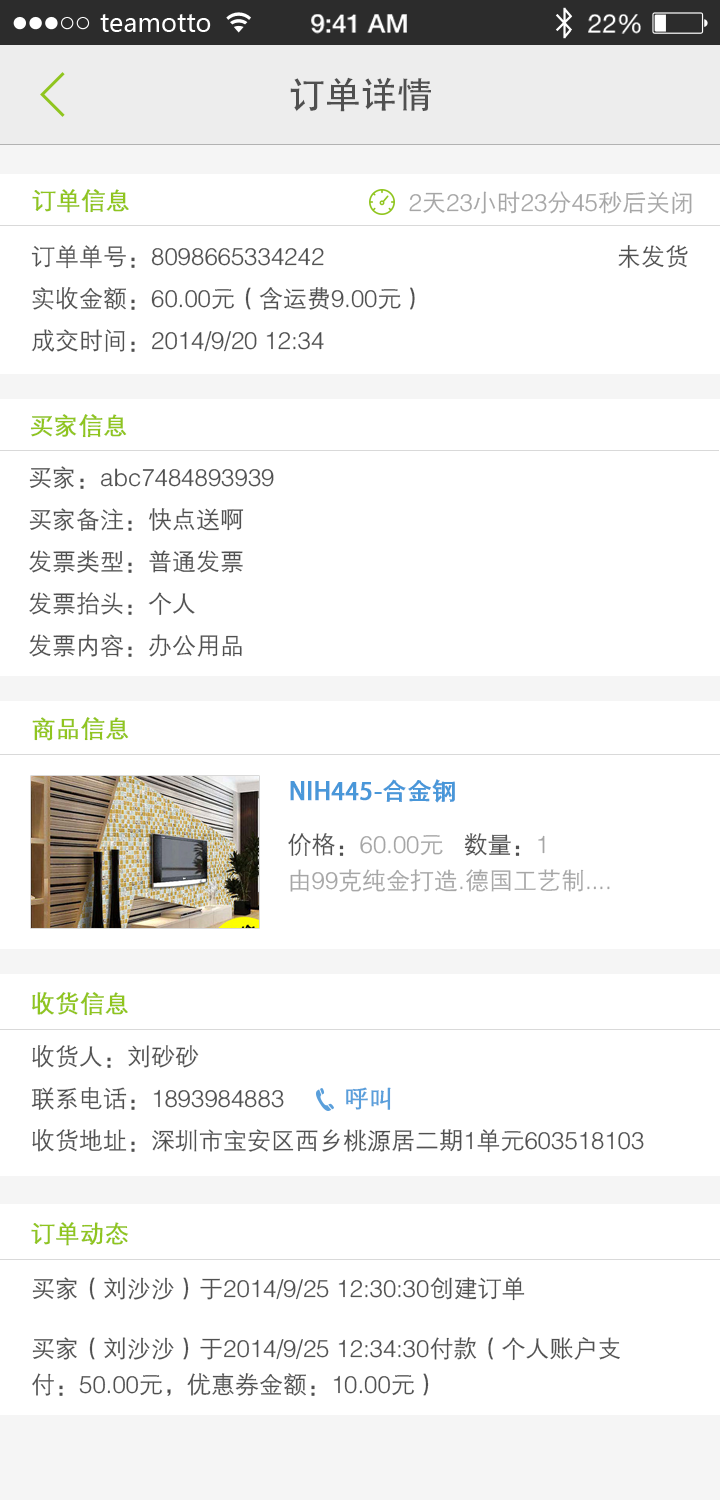
<style>
.page{position:relative;width:720px;height:1500px;background:#ffffff}
.page>*{position:absolute;margin:0}
.t1{font:36px "AdobeHeitiStd-Regular";color:#505050}
.t2{font:24px "FZZDXJW--GB1-0";color:#90c51f;font-weight:bold}
.t3{font:24px "FZZDXJW--GB1-0";color:#a6a6a6}
.t4{font:24px "FZZDXJW--GB1-0";color:#505050}
.t5{font:24px "AdobeHeitiStd-Regular";color:#4997d9;font-weight:bold}
.t6{font:24px/36px "FZZDXJW--GB1-0";color:#505050}
.t7{font:24px/36px "FZZDXJW--GB1-0";color:#a6a6a6}
.t8{font:24px "FZZDXJW--GB1-0";color:#5a9fdb;font-weight:bold}
.t9{font:24px/60px "FZZDXJW--GB1-0";color:#505050}
</style>
<div class="page">
<p class="t1" style="left:290px;top:77px;width:141px;height:35px">订单详情</p>
<p class="t2" style="left:32px;top:189px;width:97px;height:24px">订单信息</p>
<p class="t3" style="left:409px;top:191px;width:283px;height:23px">2天23小时23分45秒后关闭</p>
<p class="t4" style="left:31px;top:245px;width:657px;height:107px">订单单号：8098665334242                                            未发货<br>实收金额：60.00元（含运费9.00元）<br>成交时间：2014/9/20 12:34</p>
<p class="t2" style="left:30px;top:414px;width:97px;height:24px">买家信息</p>
<p class="t4" style="left:29px;top:466px;width:245px;height:191px">买家：abc7484893939<br>买家备注：快点送啊<br>发票类型：普通发票<br>发票抬头：个人<br>发票内容：办公用品</p>
<p class="t2" style="left:32px;top:717px;width:97px;height:24px">商品信息</p>
<p class="t5" style="left:290px;top:779px;width:165px;height:24px">NIH445-合金钢</p>
<p class="t3" style="left:288px;top:833px;width:322px;height:59px"><span class="t6">价格：</span><span class="t7">60.00元   </span><span class="t6">数量：</span><span class="t7">1<br></span>由99克纯金打造.德国工艺制....</p>
<p class="t2" style="left:32px;top:992px;width:96px;height:24px">收货信息</p>
<p class="t4" style="left:31px;top:1045px;width:613px;height:108px">收货人：刘砂砂<br>联系电话：1893984883         <span class="t8">呼叫<br></span>收货地址：深圳市宝安区西乡桃源居二期1单元603518103</p>
<p class="t2" style="left:31px;top:1222px;width:98px;height:24px">订单动态</p>
<p class="t6" style="left:32px;top:1277px;width:588px;height:119px"><span class="t9">买家（刘沙沙）于2014/9/25 12:30:30创建订单<br></span>买家（刘沙沙）于2014/9/25 12:34:30付款（个人账户支<br><span class="t4">付：50.00元，优惠券金额：10.00元）</span></p>
</div>
